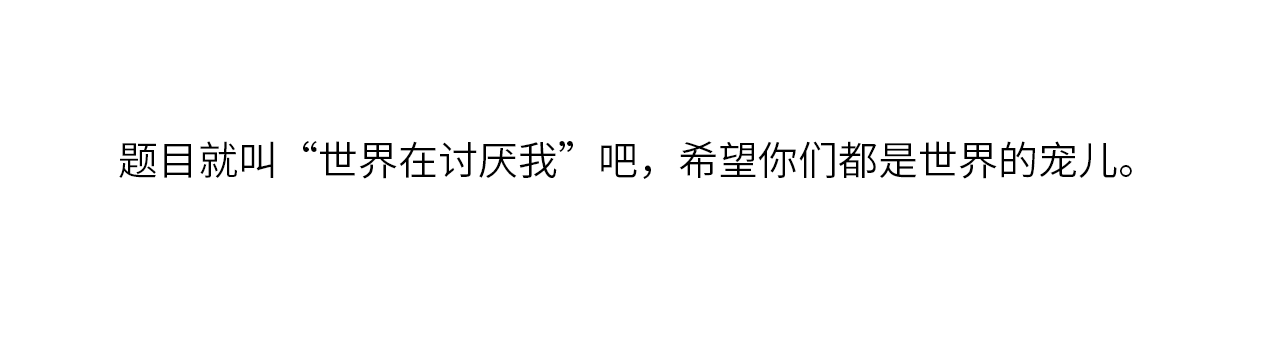
<style>
.page{position:relative;width:1280px;height:360px;background:#ffffff}
.page>*{position:absolute;margin:0}
.t1{font:40px "SourceHanSansSC-Normal";color:#000000}
</style>
<div class="page">
<p class="t1" style="left:119px;top:141px;width:1013px;height:38px">题目就叫“世界在讨厌我”吧，希望你们都是世界的宠儿。</p>
</div>
